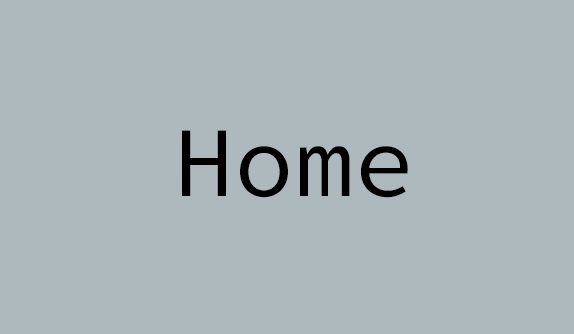
<style>
.page{position:relative;width:574px;height:334px;background:#aeb9be}
.page>*{position:absolute;margin:0}
.t1{font:100px "SourceCodePro-Regular";color:#000000}
</style>
<div class="page">
<p class="t1" style="left:182px;top:130px;width:226px;height:68px">Home</p>
</div>
